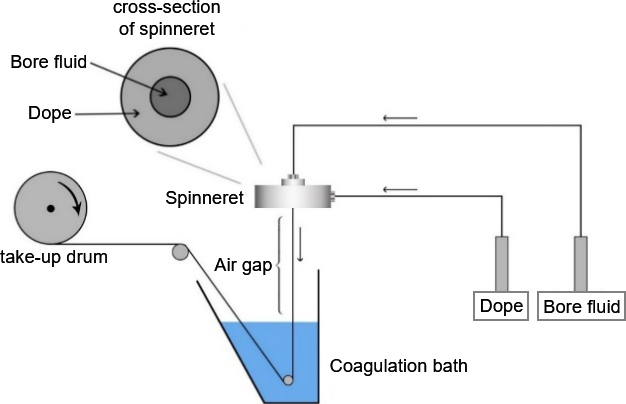
<style>
.page{position:relative;width:626px;height:404px;background:#ffffff}
.page>*{position:absolute;margin:0}
.t1{font:18.3px "ArialMT";color:#000000}
</style>
<div class="page">
<p class="t1" style="left:113px;top:0px;width:107px;height:39px;text-align:center">cross-section<br>of spinneret</p>
<p class="t1" style="left:11px;top:55px;width:75px;height:13px">Bore fluid</p>
<p class="t1" style="left:29px;top:106px;width:42px;height:17px">Dope</p>
<p class="t1" style="left:166px;top:191px;width:78px;height:17px">Spinneret</p>
<p class="t1" style="left:0px;top:250px;width:107px;height:17px">take-up drum</p>
<p class="t1" style="left:214px;top:258px;width:58px;height:17px">Air gap</p>
<p class="t1" style="left:481px;top:299px;width:42px;height:17px">Dope</p>
<p class="t1" style="left:544px;top:300px;width:76px;height:13px">Bore fluid</p>
<p class="t1" style="left:330px;top:359px;width:137px;height:17px">Coagulation bath</p>
</div>
